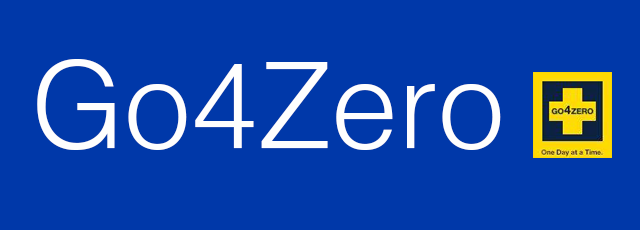
<style>
.page{position:relative;width:640px;height:230px;background:#0038a9}
.page>*{position:absolute;margin:0}
.t1{font:120px "Helvetica-Light";color:#fefefe}
</style>
<div class="page">
<p class="t1" style="left:37px;top:59px;width:464px;height:91px">Go4Zero</p>
</div>
